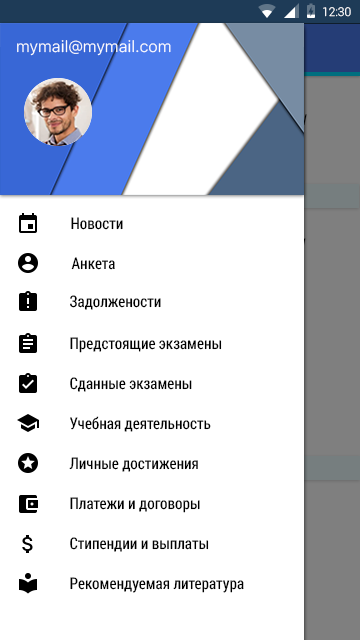
<style>
.page{position:relative;width:360px;height:640px;background:#ffffff}
.page>*{position:absolute;margin:0}
.t1{font:12px "Roboto-Light";color:#ffffff}
.t2{font:16px "SFUIText-Light";color:#fefefe}
.t3{font:16px "RobotoCondensed-Regular";color:#000000}
</style>
<div class="page">
<p class="t1" style="left:323px;top:7px;width:28px;height:10px">12:30</p>
<p class="t2" style="left:17px;top:40px;width:154px;height:16px">mymail@mymail.com</p>
<p class="t3" style="left:71px;top:217px;width:52px;height:13px">Новости</p>
<p class="t3" style="left:71px;top:257px;width:44px;height:13px">Анкета</p>
<p class="t3" style="left:70px;top:295px;width:91px;height:15px">Задолжености</p>
<p class="t3" style="left:70px;top:337px;width:152px;height:16px">Предстоящие экзамены</p>
<p class="t3" style="left:70px;top:377px;width:122px;height:15px">Сданные экзамены</p>
<p class="t3" style="left:70px;top:416px;width:141px;height:16px">Учебная деятельность</p>
<p class="t3" style="left:69px;top:457px;width:129px;height:15px">Личные достижения</p>
<p class="t3" style="left:70px;top:497px;width:130px;height:16px">Платежи и договоры</p>
<p class="t3" style="left:70px;top:537px;width:139px;height:15px">Стипендии и выплаты</p>
<p class="t3" style="left:70px;top:577px;width:174px;height:16px">Рекомендуемая литература</p>
</div>
